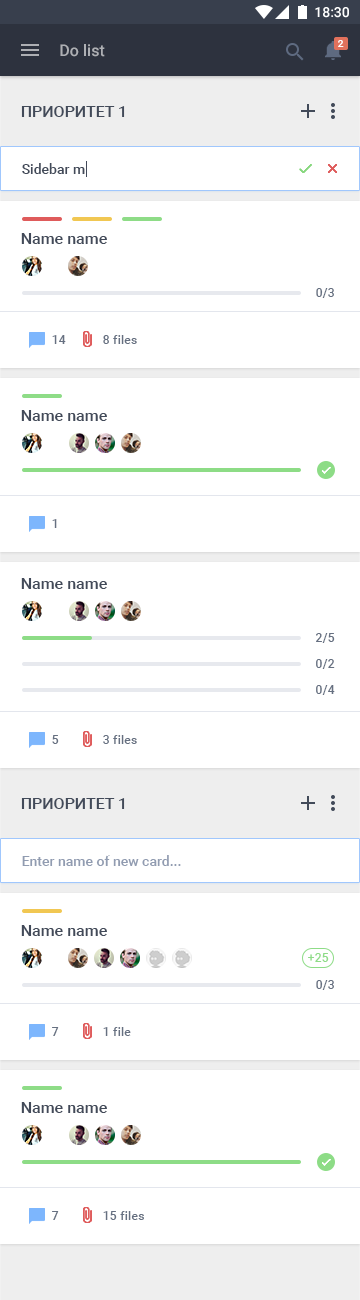
<style>
.page{position:relative;width:360px;height:1300px;background:#ffffff}
.page>*{position:absolute;margin:0}
.t1{font:10px "Roboto-Medium";letter-spacing:0.015em;color:#ffffff;text-transform:uppercase}
.t2{font:16px "Roboto-Medium";letter-spacing:0.005em;color:#aeb0b4}
.t3{font:16px "Roboto-Medium";color:#424a59;text-transform:uppercase}
.t4{font:14px "Roboto-Medium";color:#424a59}
.t5{font:16px "Roboto-Medium";color:#424a59}
.t6{font:12px "Roboto-Medium";letter-spacing:0.025em;color:#667081}
.t7{font:14px "Roboto-Medium";color:#919cb1}
.t8{font:12px "Roboto-Medium";letter-spacing:0.025em;color:#8edc87}
</style>
<div class="page">
<p class="t1" style="left:338px;top:40px;width:6px;height:7px">2</p>
<p class="t2" style="left:60px;top:44px;width:45px;height:13px">Do list</p>
<p class="t3" style="left:21px;top:106px;width:104px;height:11px">Приоритет 1</p>
<p class="t4" style="left:22px;top:163px;width:63px;height:11px">Sidebar m</p>
<p class="t5" style="left:21px;top:233px;width:86px;height:11px">Name name</p>
<p class="t6" style="left:316px;top:288px;width:18px;height:10px">0/3</p>
<p class="t6" style="left:52px;top:335px;width:14px;height:9px">14</p>
<p class="t6" style="left:103px;top:335px;width:34px;height:9px">8 files</p>
<p class="t5" style="left:21px;top:410px;width:86px;height:11px">Name name</p>
<p class="t6" style="left:52px;top:519px;width:5px;height:9px">1</p>
<p class="t5" style="left:21px;top:578px;width:86px;height:11px">Name name</p>
<p class="t6" style="left:316px;top:633px;width:19px;height:10px">2/5</p>
<p class="t6" style="left:316px;top:659px;width:19px;height:10px">0/2</p>
<p class="t6" style="left:316px;top:685px;width:19px;height:10px">0/4</p>
<p class="t6" style="left:52px;top:735px;width:7px;height:9px">5</p>
<p class="t6" style="left:103px;top:735px;width:34px;height:9px">3 files</p>
<p class="t3" style="left:21px;top:798px;width:104px;height:11px">Приоритет 1</p>
<p class="t7" style="left:22px;top:855px;width:159px;height:11px">Enter name of new card...</p>
<p class="t5" style="left:21px;top:925px;width:86px;height:11px">Name name</p>
<p class="t8" style="left:308px;top:953px;width:21px;height:9px">+25</p>
<p class="t6" style="left:316px;top:980px;width:18px;height:10px">0/3</p>
<p class="t6" style="left:52px;top:1027px;width:7px;height:9px">7</p>
<p class="t6" style="left:103px;top:1027px;width:28px;height:9px">1 file</p>
<p class="t5" style="left:21px;top:1102px;width:86px;height:11px">Name name</p>
<p class="t6" style="left:52px;top:1211px;width:7px;height:9px">7</p>
<p class="t6" style="left:103px;top:1211px;width:41px;height:9px">15 files</p>
</div>
